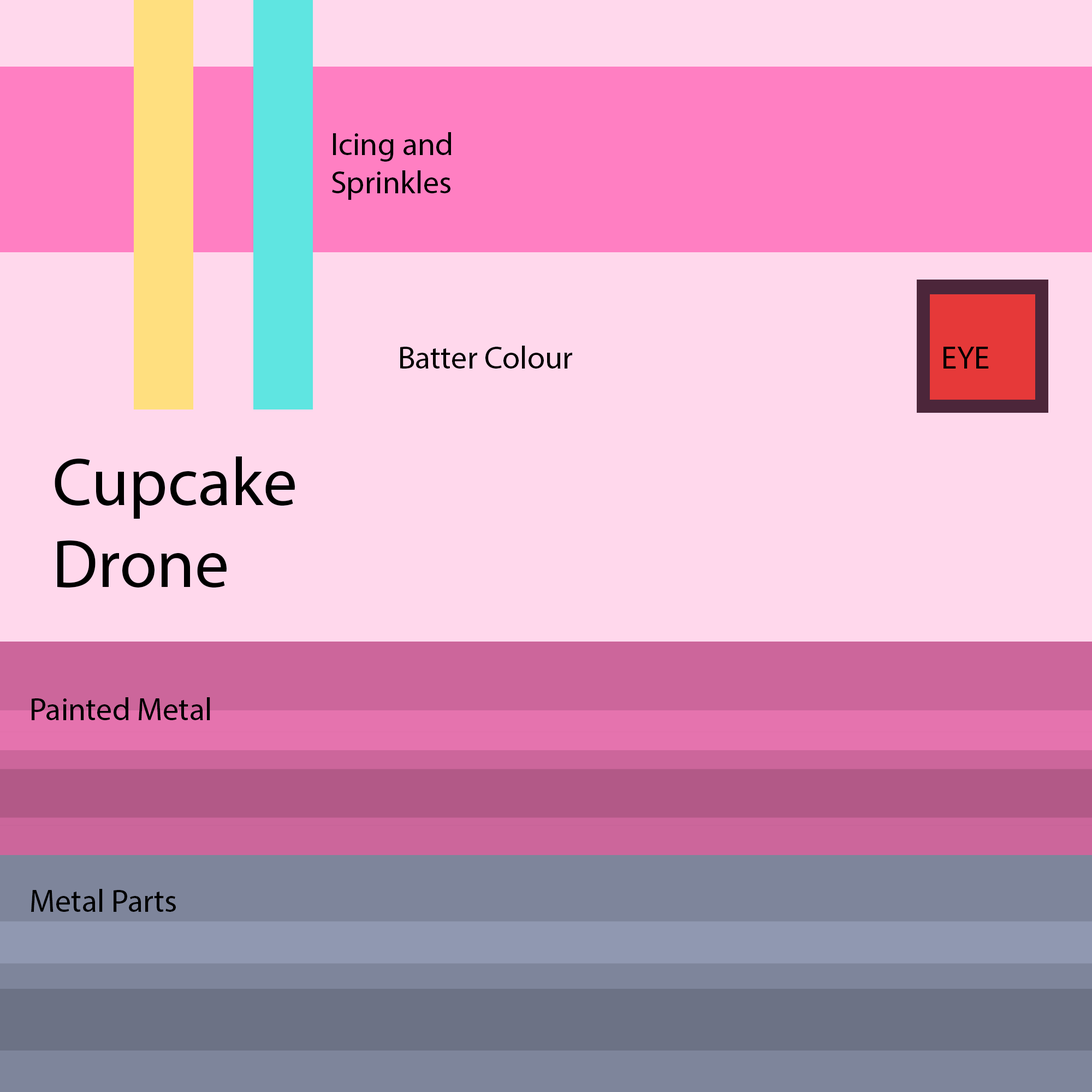
<style>
.page{position:relative;width:1092px;height:1092px;background:#ffd8ec}
.page>*{position:absolute;margin:0}
.t1{font:31.8px "MyriadPro-Regular";color:#000000}
.t2{font:68.2px "MyriadPro-Regular";color:#000000}
</style>
<div class="page">
<p class="t1" style="left:332px;top:132px;width:120px;height:68px">Icing and Sprinkles</p>
<p class="t1" style="left:400px;top:346px;width:172px;height:23px">Batter Colour</p>
<p class="t1" style="left:943px;top:347px;width:46px;height:22px">EYE</p>
<p class="t2" style="left:55px;top:456px;width:240px;height:132px">Cupcake Drone</p>
<p class="t1" style="left:32px;top:697px;width:178px;height:23px">Painted Metal</p>
<p class="t1" style="left:31px;top:889px;width:145px;height:23px">Metal Parts</p>
</div>
